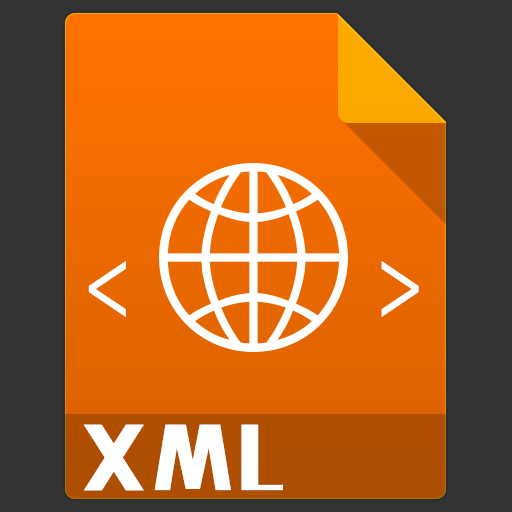
<style>
.page{position:relative;width:512px;height:512px;background:#333333}
.page>*{position:absolute;margin:0}
.t1{font:99px "SourceCodeProYaHeiHybrid";letter-spacing:0.07em;color:#ffffff}
.t2{font:72px "MFLiHei_Noncommercial-Regular";letter-spacing:0.07em;color:#ffffff}
</style>
<div class="page">
<p class="t1" style="left:88px;top:261px;width:331px;height:56px">&lt;    &gt;</p>
<p class="t2" style="left:83px;top:424px;width:200px;height:67px">XML</p>
</div>
